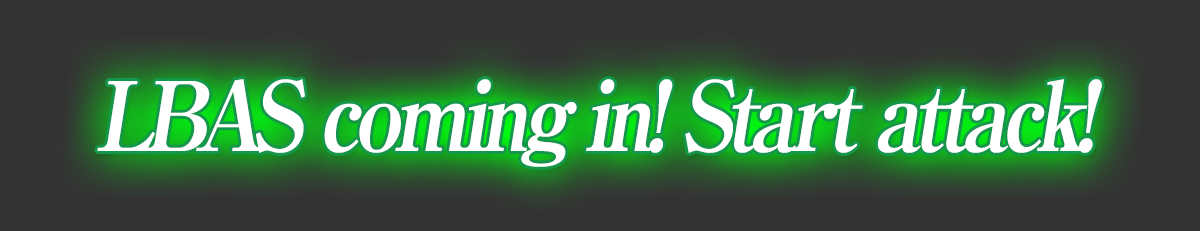
<style>
.page{position:relative;width:1200px;height:231px;background:#333333}
.page>*{position:absolute;margin:0}
.t1{font:96px "RyuminPro-ExBold";letter-spacing:-0.08em;color:#ffffff;font-style:italic;scale:0.9 1}
</style>
<div class="page">
<p class="t1" style="left:97px;top:79px;width:1005px;height:88px">LBAS coming in! Start attack!</p>
</div>
